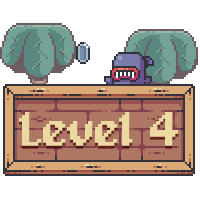
<style>
.page{position:relative;width:200px;height:200px;background:#ffffff}
.page>*{position:absolute;margin:0}
.t1{font:48px "Alagard";letter-spacing:-0.02em;color:#ebd9a1;font-weight:bold}
</style>
<div class="page">
<p class="t1" style="left:19px;top:112px;width:160px;height:34px">Level 4</p>
<p class="t1" style="left:19px;top:115px;width:160px;height:34px">Level 4</p>
</div>
